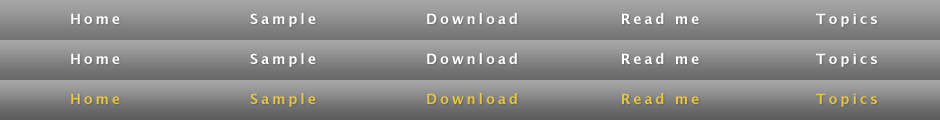
<style>
.page{position:relative;width:940px;height:120px}
.page>*{position:absolute;margin:0}
.t1{font:14px "LucidaGrande-Bold";letter-spacing:0.2em;color:#ffffff}
.t2{font:14px "LucidaGrande-Bold";letter-spacing:0.2em;color:#e5c442}
</style>
<div class="page">
<p class="t1" style="left:71px;top:13px;width:49px;height:11px">Home</p>
<p class="t1" style="left:250px;top:13px;width:66px;height:14px">Sample</p>
<p class="t1" style="left:427px;top:13px;width:90px;height:11px">Download</p>
<p class="t1" style="left:622px;top:13px;width:77px;height:11px">Read me</p>
<p class="t1" style="left:816px;top:13px;width:61px;height:14px">Topics</p>
<p class="t1" style="left:71px;top:53px;width:49px;height:11px">Home</p>
<p class="t1" style="left:250px;top:53px;width:66px;height:14px">Sample</p>
<p class="t1" style="left:427px;top:53px;width:90px;height:11px">Download</p>
<p class="t1" style="left:622px;top:53px;width:77px;height:11px">Read me</p>
<p class="t1" style="left:816px;top:53px;width:61px;height:14px">Topics</p>
<p class="t2" style="left:71px;top:93px;width:49px;height:11px">Home</p>
<p class="t2" style="left:250px;top:93px;width:66px;height:14px">Sample</p>
<p class="t2" style="left:427px;top:93px;width:90px;height:11px">Download</p>
<p class="t2" style="left:622px;top:93px;width:77px;height:11px">Read me</p>
<p class="t2" style="left:816px;top:93px;width:61px;height:14px">Topics</p>
</div>
